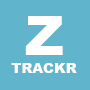
<style>
.page{position:relative;width:90px;height:90px;background:#60b4cc}
.page>*{position:absolute;margin:0}
.t1{font:14.1px/17.6px "Arial-Black";color:#ffffff;text-transform:uppercase}
.t2{font:53.8px/17.6px "Arial-Black";color:#ffffff;text-transform:uppercase}
</style>
<div class="page">
<p class="t1" style="left:11px;top:16px;width:66px;height:57px;text-align:center"><span class="t2"> z <br></span>trackr</p>
</div>
